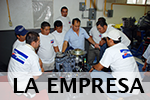
<style>
.page{position:relative;width:150px;height:100px}
.page>*{position:absolute;margin:0}
.t1{font:20.8px "LucidaGrande-Bold";color:#000000}
</style>
<div class="page">
<p class="t1" style="left:13px;top:78px;width:132px;height:15px">LA EMPRESA</p>
</div>
